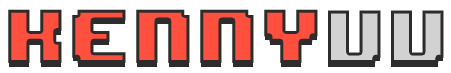
<style>
.page{position:relative;width:451px;height:73px;background:#ffffff}
.page>*{position:absolute;margin:0}
.t1{font:64px "8BITWONDERNominal";color:#ff503f}
.t2{font:63px "8BITWONDERNominal";color:#d2d2d2}
</style>
<div class="page">
<p class="t1" style="left:8px;top:9px;width:436px;height:54px">KENNY<span class="t2">vv</span></p>
</div>
